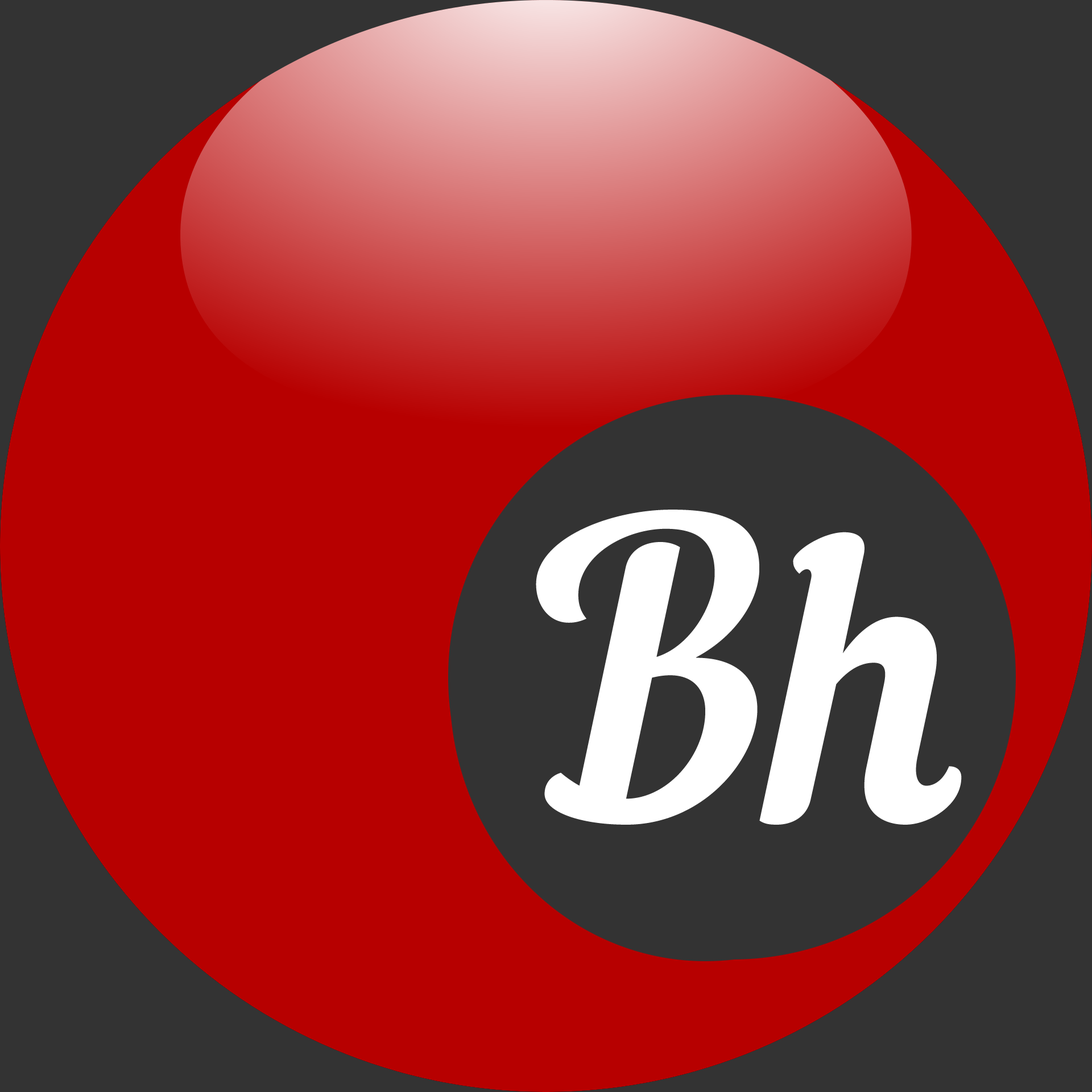
<style>
.page{position:relative;width:1092px;height:1092px;background:#333333}
.page>*{position:absolute;margin:0}
.t1{font:404.8px "NautilusPompilius";color:#ffffff}
</style>
<div class="page">
<p class="t1" style="left:536px;top:510px;width:426px;height:315px">Bh</p>
</div>
